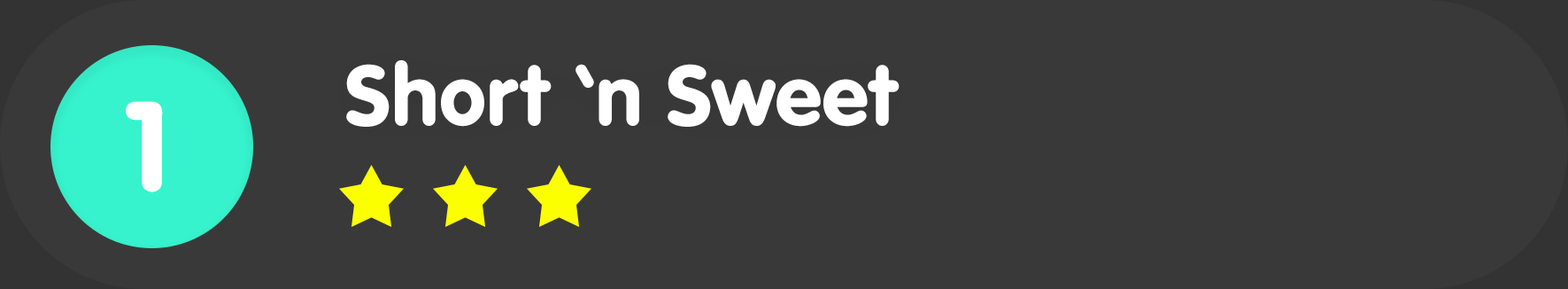
<style>
.page{position:relative;width:1568px;height:289px;background:#393939}
.page>*{position:absolute;margin:0}
.t1{font:88.5px "VAGRundschriftD";color:#ffffff}
.t2{font:132.8px "VAGRundschriftD";color:#ffffff}
</style>
<div class="page">
<p class="t1" style="left:346px;top:59px;width:554px;height:68px">Short ‘n Sweet</p>
<p class="t2" style="left:126px;top:101px;width:37px;height:91px">1</p>
</div>
